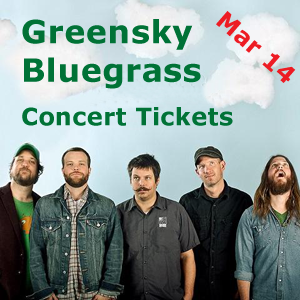
<style>
.page{position:relative;width:300px;height:300px}
.page>*{position:absolute;margin:0}
.t1{font:24px "Verdana-Bold";letter-spacing:0.018em;color:#ed1c24}
.t2{font:32px "Verdana-Bold";letter-spacing:0.018em;color:#007236}
.t3{font:24px "Verdana-Bold";letter-spacing:0.018em;color:#007236}
</style>
<div class="page">
<p class="t1" style="left:216px;top:11px;width:80px;height:72px;rotate:41deg">Mar 14</p>
<p class="t2" style="left:22px;top:19px;width:179px;height:70px">Greensky Bluegrass</p>
<p class="t3" style="left:22px;top:107px;width:211px;height:19px">Concert Tickets</p>
</div>
